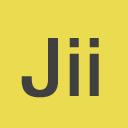
<style>
.page{position:relative;width:128px;height:128px;background:#eadb50}
.page>*{position:absolute;margin:0}
.t1{font:80px "HelveticaNeue";color:#404040;font-weight:bold}
</style>
<div class="page">
<p class="t1" style="left:21px;top:38px;width:78px;height:60px">Jii</p>
</div>
